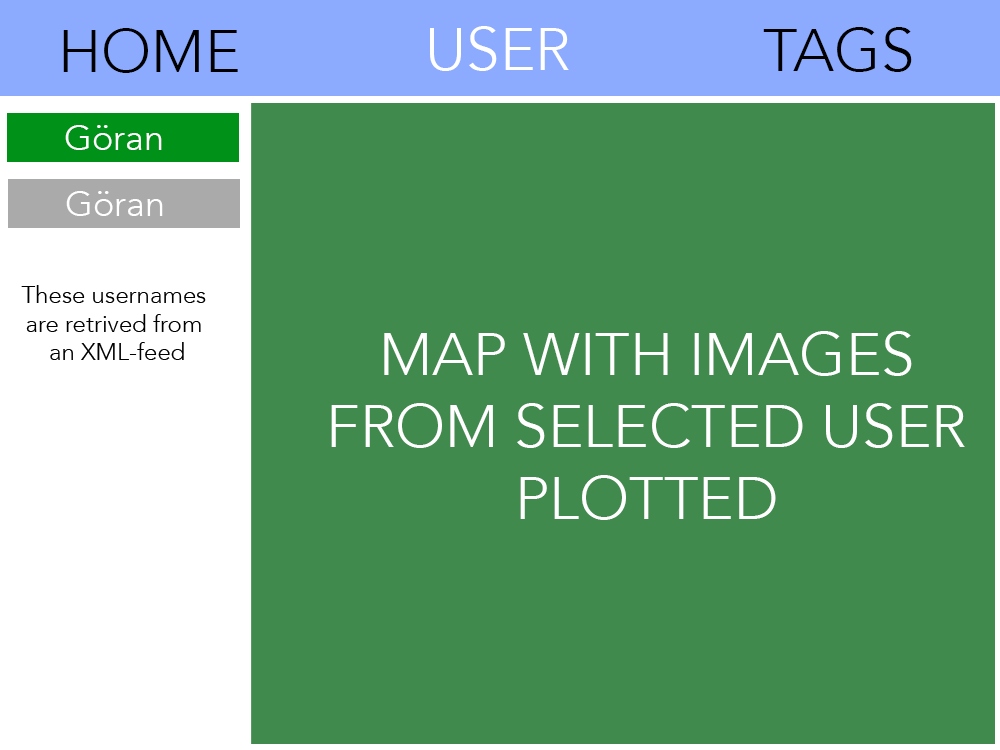
<style>
.page{position:relative;width:1000px;height:750px;background:#418a4d}
.page>*{position:absolute;margin:0}
.t1{font:60px "Avenir-Light";color:#000000}
.t2{font:60px "Avenir-Light";color:#ffffff}
.t3{font:36px "Avenir-Light";color:#ffffff}
.t4{font:24px "Avenir-Light";color:#000000}
</style>
<div class="page">
<p class="t1" style="left:63px;top:28px;width:175px;height:45px">HOME</p>
<p class="t2" style="left:430px;top:26px;width:139px;height:45px">USER</p>
<p class="t1" style="left:763px;top:27px;width:149px;height:45px">TAGS</p>
<p class="t3" style="left:65px;top:125px;width:97px;height:25px">Göran</p>
<p class="t3" style="left:66px;top:191px;width:97px;height:25px">Göran</p>
<p class="t4" style="left:21px;top:285px;width:185px;height:75px;text-align:center">These usernames <br>are retrived from <br>an XML-feed</p>
<p class="t2" style="left:331px;top:331px;width:634px;height:189px;text-align:center">MAP WITH IMAGES<br>FROM SELECTED USER<br>PLOTTED</p>
</div>
